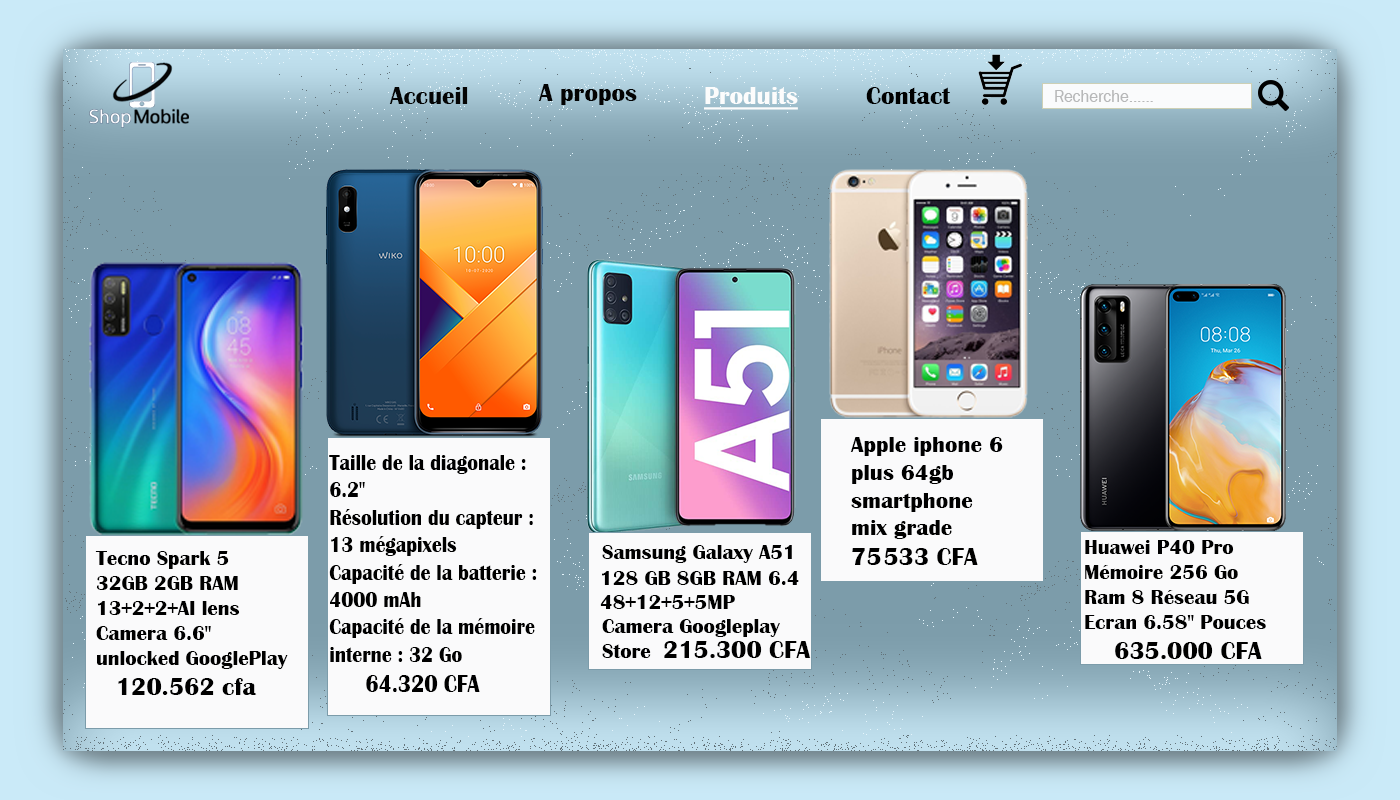
<style>
.page{position:relative;width:1400px;height:800px}
.page>*{position:absolute;margin:0}
.t1{font:25px "BritannicBold";color:#050505}
.t2{font:25px "BritannicBold";color:#030303}
.t3{font:25px "BritannicBold";color:#fcfcfc;text-decoration:underline}
.t4{font:25px "BritannicBold";color:#000000}
.t5{font:16.7px "FranklinGothic-Book";color:#b7b8b9}
.t6{font:23px "BritannicBold";color:#000000}
.t7{font:22.8px "BritannicBold";color:#000000;scale:0.86 1}
.t8{font:25px "BritannicBold";color:#000000;scale:0.86 1}
.t9{font:20.8px "BritannicBold";color:#000000}
</style>
<div class="page">
<p class="t1" style="left:389px;top:86px;width:79px;height:18px">Accueil</p>
<p class="t2" style="left:538px;top:84px;width:99px;height:21px">A propos</p>
<p class="t3" style="left:704px;top:86px;width:94px;height:24px">Produits</p>
<p class="t4" style="left:866px;top:87px;width:85px;height:17px">Contact</p>
<p class="t5" style="left:1055px;top:90px;width:98px;height:12px">Recherche......</p>
<p class="t6" style="left:850px;top:437px;width:153px;height:128px">Apple iphone 6<br>plus 64gb <br>smartphone <br>mix grade<br><span class="t4">75 533 CFA</span></p>
<p class="t7" style="left:329px;top:455px;width:208px;height:237px">Taille de la diagonale : <br>6.2"<br>Résolution du capteur : <br>13 mégapixels<br>Capacité de la batterie : <br>4000 mAh<br>Capacité de la mémoire <br>interne : 32 Go <br>     <span class="t8"> 64.320 CFA</span></p>
<p class="t9" style="left:602px;top:545px;width:190px;height:18px">Samsung Galaxy A51</p>
<p class="t9" style="left:1085px;top:540px;width:181px;height:119px">Huawei P40 Pro<br>Mémoire 256 Go<br>Ram 8 Réseau 5G<br>Ecran 6.58" Pouces<br><span class="t4">    635.000 CFA</span></p>
<p class="t9" style="left:95px;top:551px;width:193px;height:144px">Tecno Spark 5<br>32GB 2GB RAM<br>13+2+2+AI lens<br>Camera 6.6" <br>unlocked GooglePlay<br>  <span class="t4"> 120.562 cfa</span></p>
<p class="t9" style="left:602px;top:571px;width:197px;height:14px">128 GB 8GB RAM 6.4</p>
<p class="t9" style="left:600px;top:595px;width:135px;height:14px">48+12+5+5MP</p>
<p class="t9" style="left:602px;top:619px;width:178px;height:39px">Camera Googleplay <br>Store</p>
<p class="t4" style="left:664px;top:641px;width:147px;height:17px">215.300 CFA</p>
</div>
